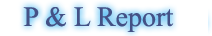
<style>
.page{position:relative;width:212px;height:36px;background:#ffffff}
.page>*{position:absolute;margin:0}
.t1{font:28px "TimesNewRomanPSMT";color:#445186}
.t2{font:27px "TimesNewRomanPSMT";color:#445186}
</style>
<div class="page">
<p class="t1" style="left:23px;top:7px;width:151px;height:25px"><span class="t2">  </span>P &amp; L Report</p>
</div>
